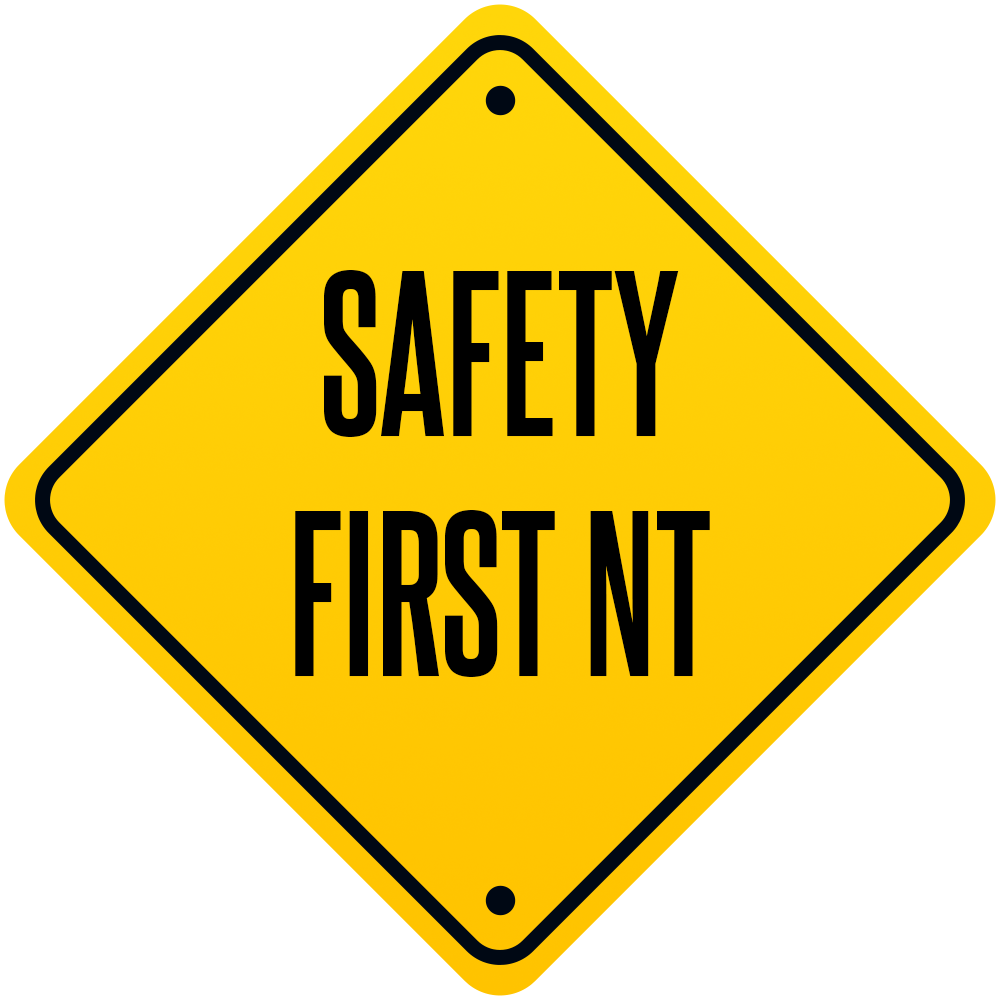
<style>
.page{position:relative;width:1000px;height:1000px;background:#ffffff}
.page>*{position:absolute;margin:0}
.t1{font:200px "SteelfishRg-Bold";color:#000000}
</style>
<div class="page">
<p class="t1" style="left:295px;top:270px;width:415px;height:407px;text-align:center">SAFETY<br>FIRST NT</p>
</div>
